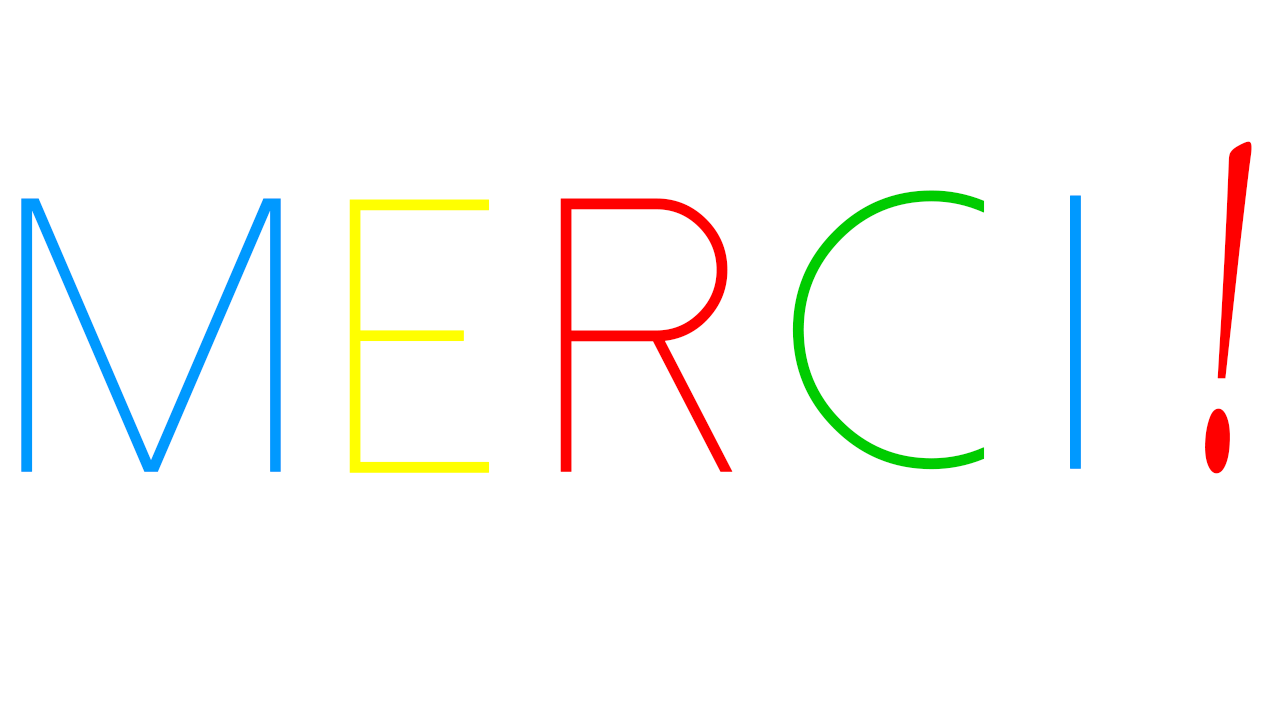
<style>
.page{position:relative;width:1280px;height:720px;background:#ffffff}
.page>*{position:absolute;margin:0}
.t1{font:548.8px "MonotypeCorsiva";color:#ff0000;font-weight:bold;scale:0.45 1}
.t2{font:186.9px "DolceVitaLight";color:#0099ff;font-weight:bold}
.t3{font:186.9px "DolceVitaLight";color:#ff0000;font-weight:bold}
.t4{font:186.9px "DolceVitaLight";color:#00cc00;font-weight:bold}
.t5{font:186.9px "DolceVitaLight";color:#ffff00;font-weight:bold}
</style>
<div class="page">
<p class="t1" style="left:1205px;top:141px;width:47px;height:333px">!</p>
<p class="t2" style="left:21px;top:198px;width:260px;height:274px">M</p>
<p class="t3" style="left:560px;top:198px;width:173px;height:274px">r</p>
<p class="t4" style="left:792px;top:190px;width:193px;height:280px">c</p>
<p class="t2" style="left:1070px;top:195px;width:11px;height:274px">i</p>
<p class="t5" style="left:349px;top:199px;width:141px;height:274px">e</p>
</div>
